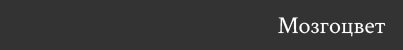
<style>
.page{position:relative;width:403px;height:50px;background:#333333}
.page>*{position:absolute;margin:0}
.t1{font:24px "CrimsonText-Regular";color:#ffffff}
</style>
<div class="page">
<p class="t1" style="left:278px;top:17px;width:108px;height:20px">Мозгоцвет</p>
</div>
